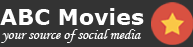
<style>
.page{position:relative;width:193px;height:47px;background:#333333}
.page>*{position:absolute;margin:0}
.t1{font:22.2px "Verdana-Bold";color:#fefefe}
.t2{font:14.8px "MonotypeCorsiva";color:#ffffff}
</style>
<div class="page">
<p class="t1" style="left:0px;top:8px;width:144px;height:17px">ABC Movies</p>
<p class="t2" style="left:1px;top:29px;width:140px;height:14px">your source of social media</p>
</div>
